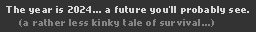
<style>
.page{position:relative;width:256px;height:32px;background:#333333}
.page>*{position:absolute;margin:0}
.t1{font:8px "NokiaCellphoneFC-Small";letter-spacing:0.025em;color:#d7d7d7}
.t2{font:8px "NokiaCellphoneFC-Small";letter-spacing:0.025em;color:#858585}
</style>
<div class="page">
<p class="t1" style="left:6px;top:6px;width:243px;height:8px">The year is 2024... a future you’ll probably see.</p>
<p class="t2" style="left:19px;top:19px;width:195px;height:8px">(a rather less kinky tale of survival...)</p>
</div>
